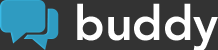
<style>
.page{position:relative;width:218px;height:50px;background:#333333}
.page>*{position:absolute;margin:0}
.t1{font:48px "Avenir-Heavy";color:#ffffff}
</style>
<div class="page">
<p class="t1" style="left:77px;top:3px;width:141px;height:49px">buddy</p>
</div>
